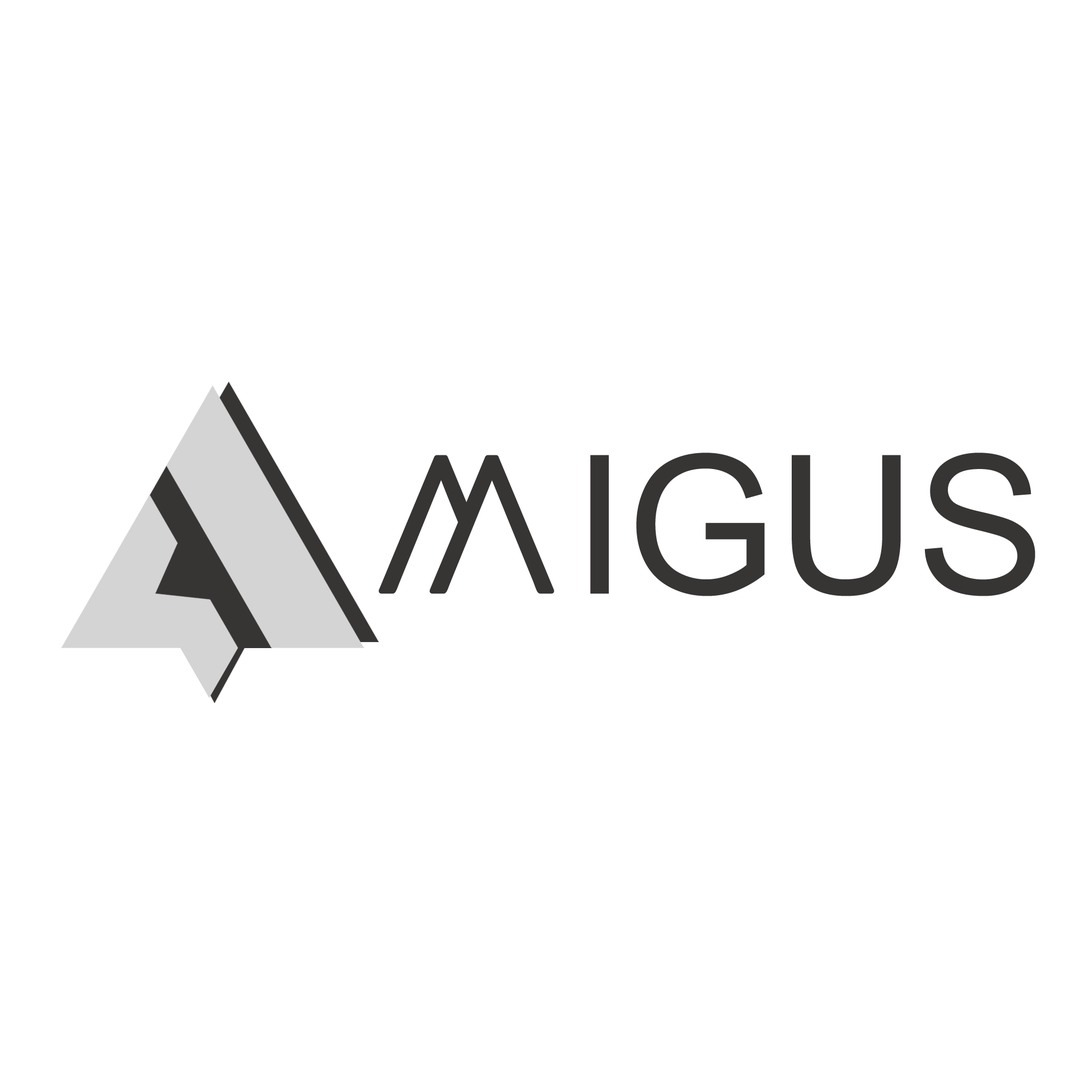
<style>
.page{position:relative;width:1092px;height:1092px;background:#ffffff}
.page>*{position:absolute;margin:0}
.t1{font:193.4px "ArialMT";color:#373434}
.t2{font:193.4px "BEYNO";color:#373434}
</style>
<div class="page">
<p class="t1" style="left:378px;top:453px;width:657px;height:143px"><span class="t2">M</span>IGUS</p>
</div>
